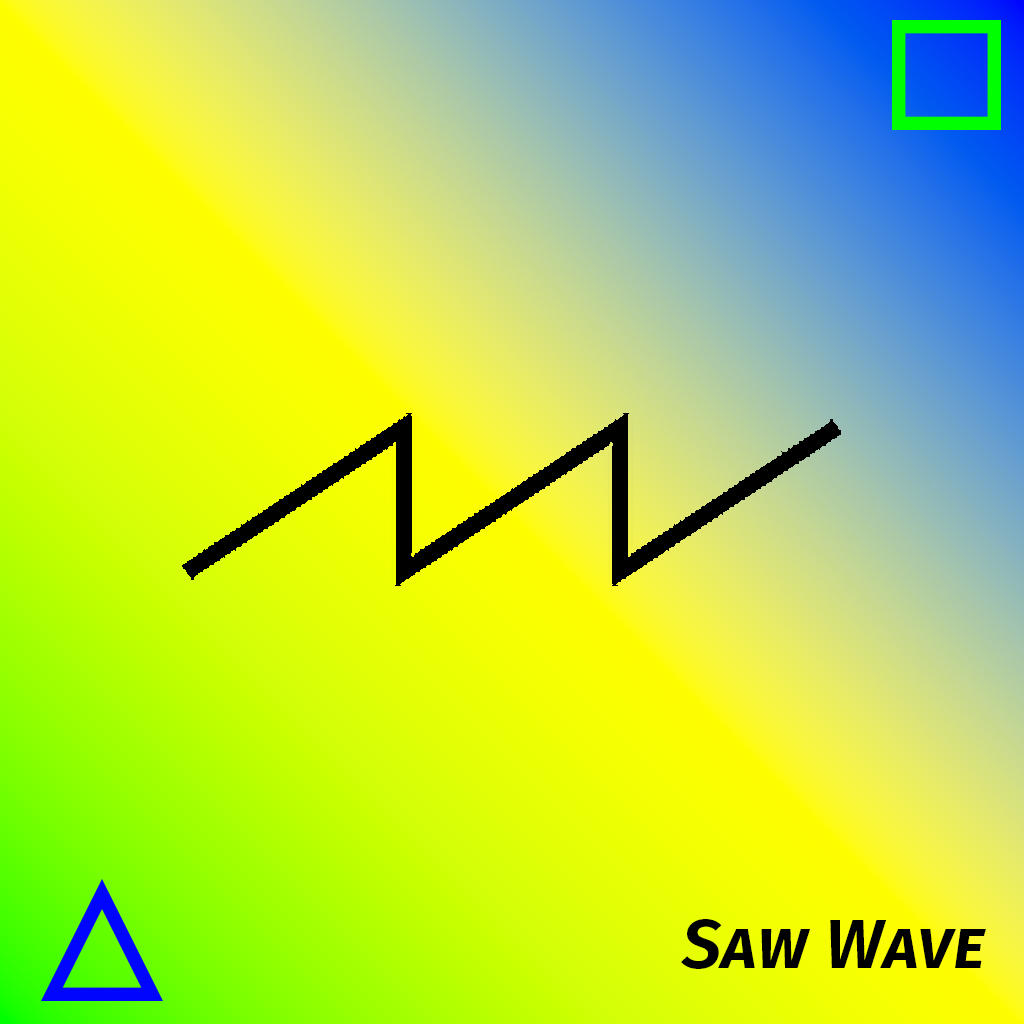
<style>
.page{position:relative;width:1024px;height:1024px}
.page>*{position:absolute;margin:0}
.t1{font:70px "FiraSans-SemiBoldItalic";color:#000000;font-variant:small-caps}
</style>
<div class="page">
<p class="t1" style="left:681px;top:919px;width:305px;height:50px">Saw Wave</p>
</div>
